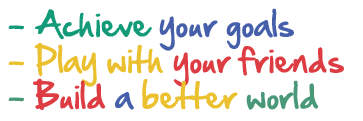
<style>
.page{position:relative;width:363px;height:121px;background:#ffffff}
.page>*{position:absolute;margin:0}
.t1{font:30px "HandOfSean";color:#dd3c42}
.t2{font:30px "HandOfSean";color:#139a79}
.t3{font:30px "HandOfSean";color:#455faa}
.t4{font:30px "HandOfSean";color:#eac02e}
.t5{font:30px "HandOfSean";color:#499878}
.t6{font:30px "HandOfSean";color:#ebc12f}
</style>
<div class="page">
<p class="t1" style="left:8px;top:8px;width:336px;height:102px"><span class="t2">- Achieve </span><span class="t3">your goals<br></span><span class="t4">- Play with </span>your friends<br><span class="t5">- </span>Build <span class="t3">a </span><span class="t6">better </span><span class="t5">world</span></p>
</div>
